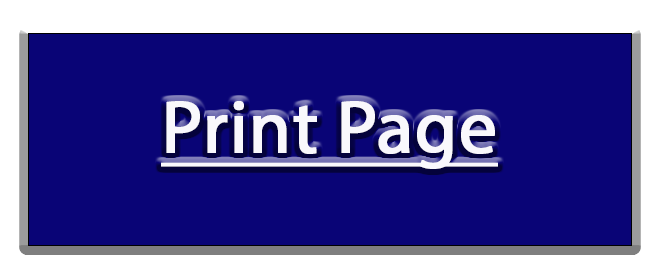
<style>
.page{position:relative;width:656px;height:276px;background:#090476}
.page>*{position:absolute;margin:0}
.t1{font:75px "MyriadPro-Regular";color:#f9f8fc;font-weight:bold;text-decoration:underline}
</style>
<div class="page">
<p class="t1" style="left:161px;top:101px;width:337px;height:68px">Print Page</p>
</div>
